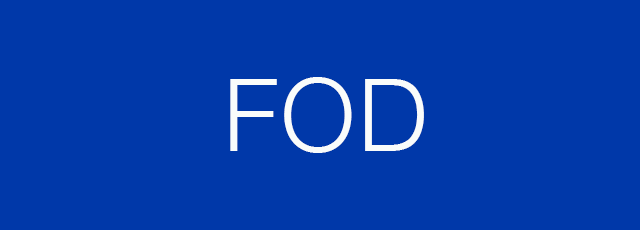
<style>
.page{position:relative;width:640px;height:230px;background:#0038a9}
.page>*{position:absolute;margin:0}
.t1{font:100px "Helvetica-Light";color:#f9fcfb}
</style>
<div class="page">
<p class="t1" style="left:230px;top:77px;width:194px;height:76px">FOD</p>
</div>
